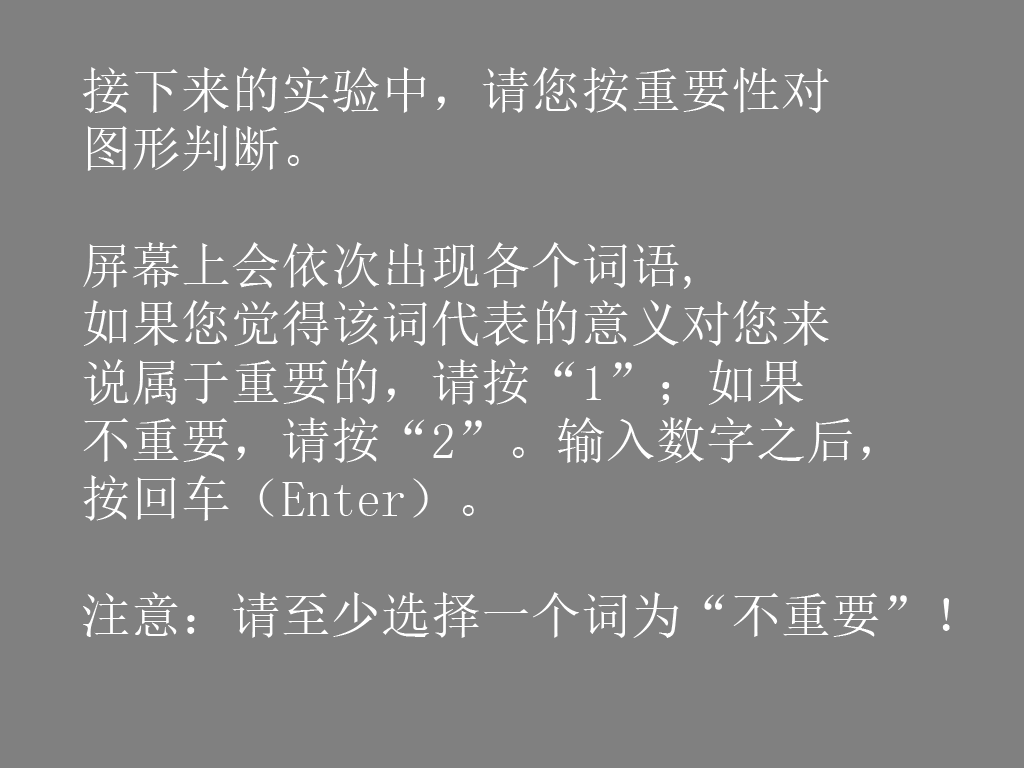
<style>
.page{position:relative;width:1024px;height:768px;background:#808080}
.page>*{position:absolute;margin:0}
.t1{font:50px/58.3px "SimSun";color:#ffffff}
</style>
<div class="page">
<p class="t1" style="left:82px;top:67px;width:868px;height:571px">接下来的实验中，请您按重要性对<br>图形判断。<br><br>屏幕上会依次出现各个词语,<br>如果您觉得该词代表的意义对您来<br>说属于重要的，请按“1”；如果<br>不重要，请按“2”。输入数字之后，<br>按回车（Enter）。<br><br>注意：请至少选择一个词为“不重要”！</p>
</div>
